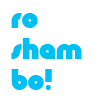
<style>
.page{position:relative;width:100px;height:100px;background:#ffffff}
.page>*{position:absolute;margin:0}
.t1{font:26px "KnuckleDown";color:#00bff3}
</style>
<div class="page">
<p class="t1" style="left:11px;top:13px;width:71px;height:77px">Ro<br>Sham <br>Bo!</p>
</div>
